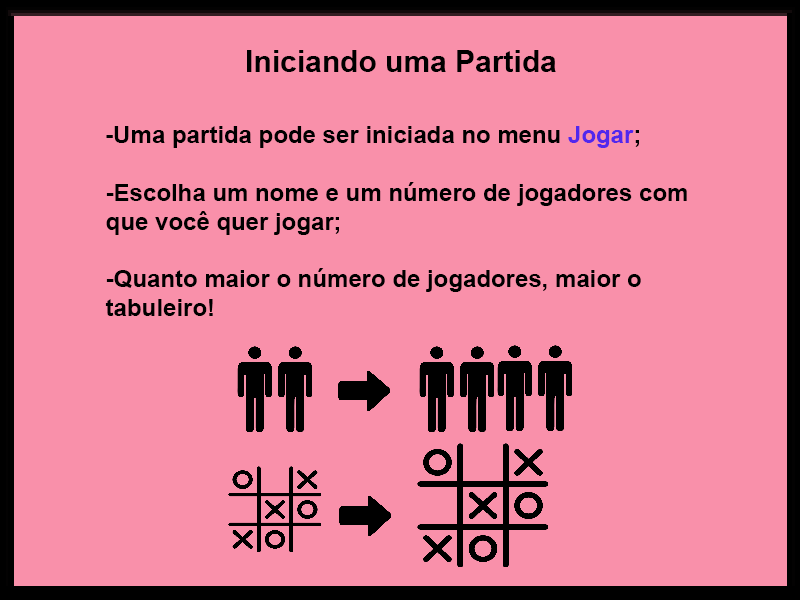
<style>
.page{position:relative;width:800px;height:600px;background:#f990aa}
.page>*{position:absolute;margin:0}
.t1{font:30px "Arial-BoldMT";color:#000000}
.t2{font:24px "Arial-BoldMT";color:#000000}
.t3{font:24px "Arial-BoldMT";color:#5127ed}
</style>
<div class="page">
<p class="t1" style="left:247px;top:50px;width:309px;height:22px">Iniciando uma Partida</p>
<p class="t2" style="left:105px;top:126px;width:582px;height:190px">-Uma partida pode ser iniciada no menu <span class="t3">Jogar</span>;<br><br>-Escolha um nome e um número de jogadores com que você quer jogar;<br><br>-Quanto maior o número de jogadores, maior o tabuleiro!</p>
</div>
